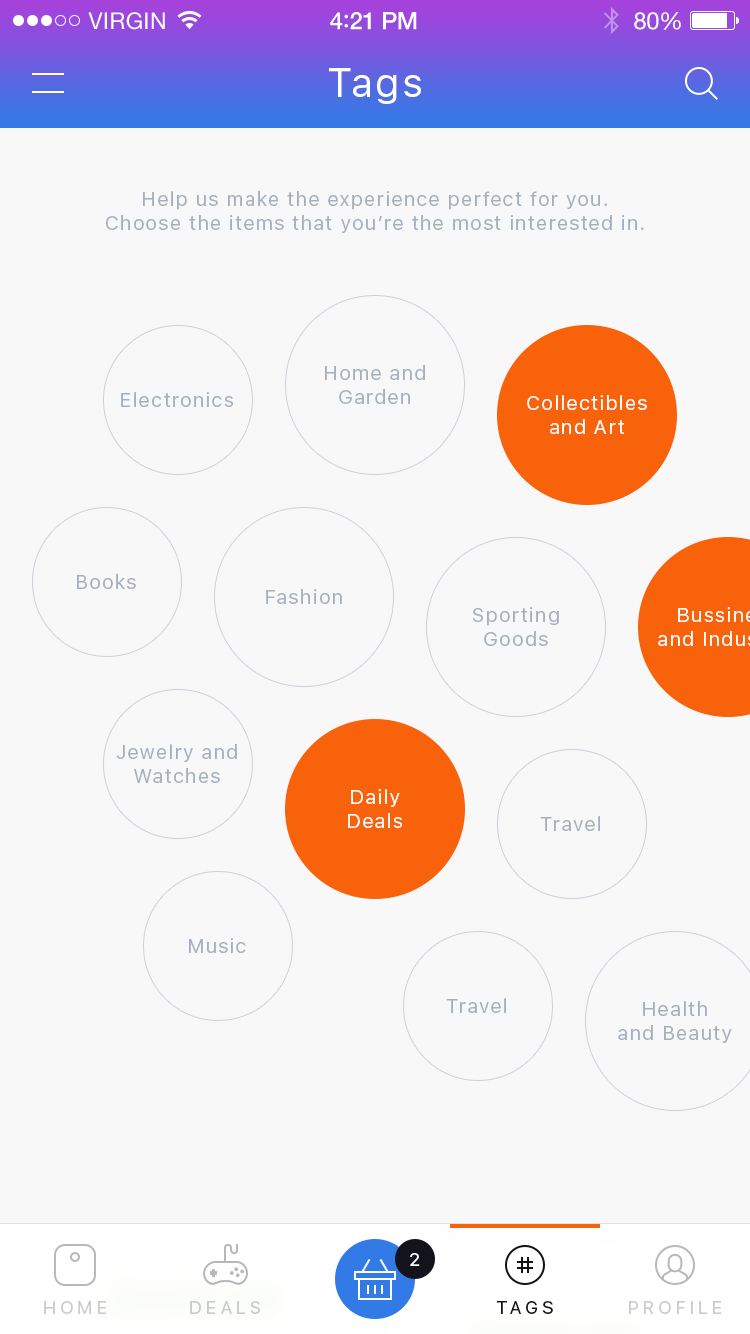
<style>
.page{position:relative;width:750px;height:1334px;background:#f8f8f8}
.page>*{position:absolute;margin:0}
.t1{font:40px "SFUIText-Regular";letter-spacing:0.05em;color:#ffffff}
.t2{font:20px "SFUIText-Regular";letter-spacing:0.05em;color:#a6b0bd}
.t3{font:20px "SFUIText-Regular";letter-spacing:0.05em;color:#ffffff}
.t4{font:18px "SFUIText-Regular";color:#ffffff;text-transform:uppercase}
.t5{font:18px "SFUIText-Regular";letter-spacing:0.2em;color:#cccccd;text-transform:uppercase}
.t6{font:18px "SFUIText-Regular";letter-spacing:0.2em;color:#cacbc9;text-transform:uppercase}
.t7{font:18px "SFUIText-Regular";letter-spacing:0.2em;color:#13131c;text-transform:uppercase}
</style>
<div class="page">
<p class="t1" style="left:329px;top:68px;width:92px;height:36px">Tags</p>
<p class="t2" style="left:106px;top:190px;width:538px;height:43px;text-align:center">Help us make the experience perfect for you.<br>Choose the items that you’re the most interested in.</p>
<p class="t2" style="left:325px;top:365px;width:100px;height:39px;text-align:center">Home and<br>Garden</p>
<p class="t2" style="left:121px;top:392px;width:112px;height:15px">Electronics</p>
<p class="t3" style="left:527px;top:395px;width:120px;height:39px;text-align:center">Collectibles<br>and Art</p>
<p class="t2" style="left:77px;top:573px;width:59px;height:16px">Books</p>
<p class="t2" style="left:266px;top:589px;width:76px;height:15px">Fashion</p>
<p class="t2" style="left:473px;top:607px;width:86px;height:39px;text-align:center">Sporting<br>Goods</p>
<p class="t2" style="left:116px;top:744px;width:121px;height:39px;text-align:center">Jewelry and<br>Watches</p>
<p class="t3" style="left:348px;top:789px;width:54px;height:39px;text-align:center">Daily<br>Deals</p>
<p class="t2" style="left:540px;top:816px;width:60px;height:15px">Travel</p>
<p class="t2" style="left:189px;top:938px;width:57px;height:15px">Music</p>
<p class="t2" style="left:446px;top:998px;width:60px;height:15px">Travel</p>
<p class="t2" style="left:618px;top:1001px;width:114px;height:42px;text-align:center">Health<br>and Beauty</p>
<p class="t4" style="left:410px;top:1253px;width:10px;height:13px">2</p>
<p class="t5" style="left:44px;top:1301px;width:63px;height:13px">home</p>
<p class="t6" style="left:190px;top:1301px;width:70px;height:13px">deals</p>
<p class="t7" style="left:496px;top:1301px;width:57px;height:13px">tags</p>
<p class="t5" style="left:629px;top:1301px;width:93px;height:13px">profile</p>
</div>
